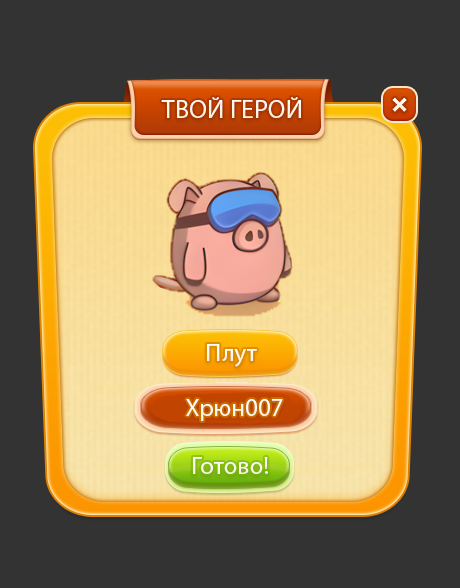
<style>
.page{position:relative;width:460px;height:588px;background:#333333}
.page>*{position:absolute;margin:0}
.t1{font:26px "MyriadPro-Regular";color:#ffffff}
.t2{font:25px "MyriadPro-Regular";color:#ffffff}
.t3{font:25px "MyriadPro-Regular";color:#fdf6e8}
</style>
<div class="page">
<p class="t1" style="left:161px;top:97px;width:140px;height:21px">ТВОЙ ГЕРОЙ</p>
<p class="t2" style="left:207px;top:344px;width:50px;height:23px">Плут</p>
<p class="t2" style="left:186px;top:399px;width:97px;height:22px">Хрюн007</p>
<p class="t3" style="left:193px;top:457px;width:75px;height:17px">Готово!</p>
</div>
